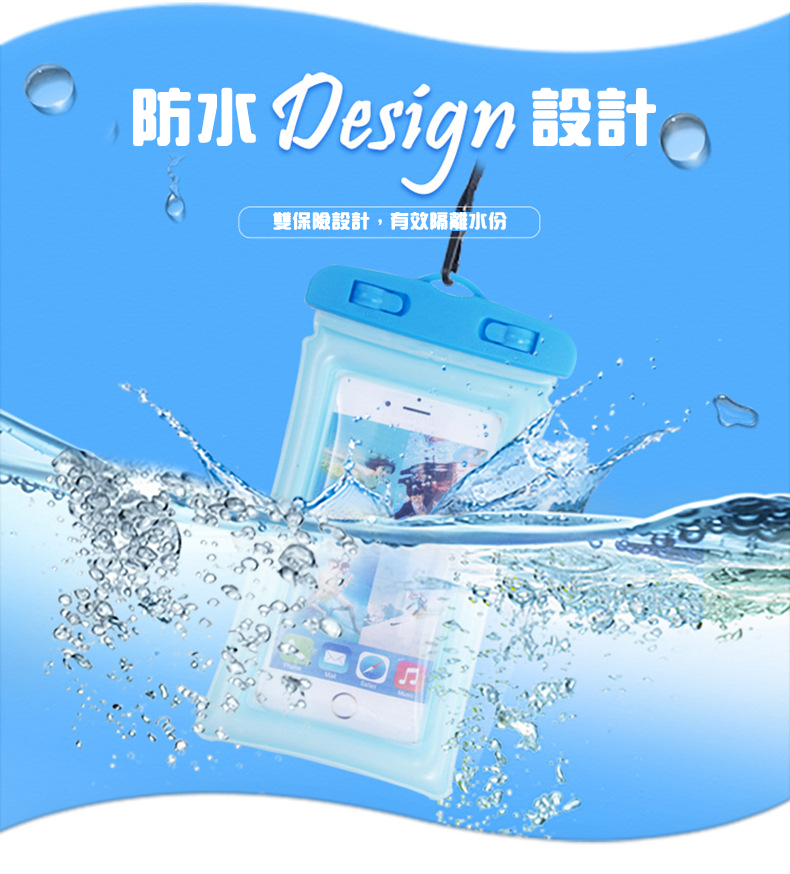
<style>
.page{position:relative;width:790px;height:874px}
.page>*{position:absolute;margin:0}
.t1{font:60px "HanWangZonYi";letter-spacing:0.05em;color:#ffffff;font-weight:bold}
.t2{font:18px "HanWangZonYi";letter-spacing:0.05em;color:#ffffff;font-weight:bold}
</style>
<div class="page">
<p class="t1" style="left:133px;top:87px;width:123px;height:59px">防水</p>
<p class="t1" style="left:532px;top:87px;width:124px;height:60px">設計</p>
<p class="t2" style="left:273px;top:212px;width:234px;height:18px">雙保險設計，有效隔離水份</p>
</div>
